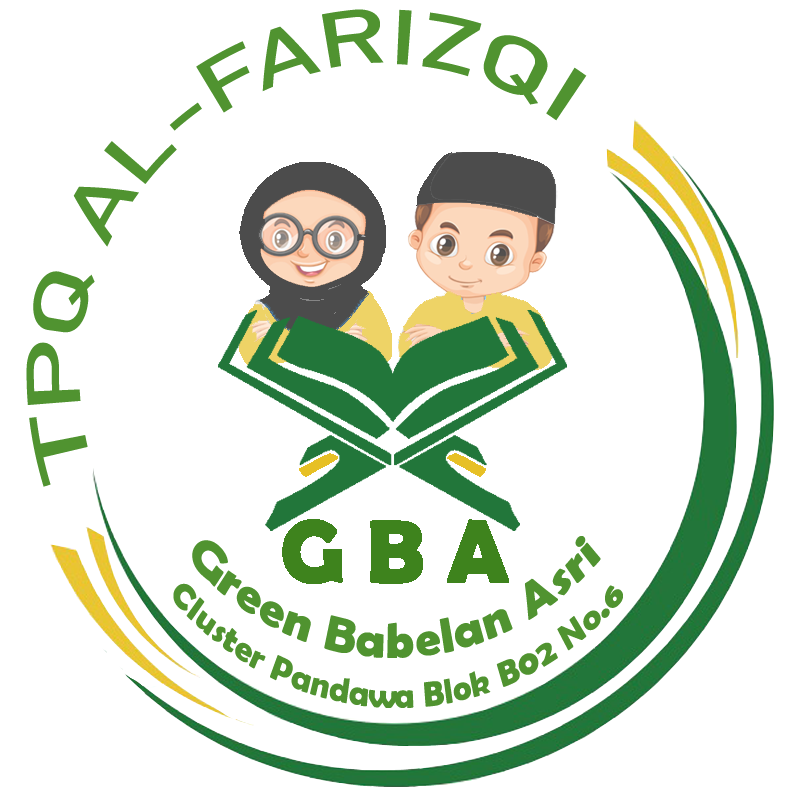
<style>
.page{position:relative;width:800px;height:800px;background:#ffffff}
.page>*{position:absolute;margin:0}
.t1{font:75px "Bahnschrift";color:#509330}
.t2{font:50px "BerlinSansFBDemi-Bold";color:#509330;scale:0.85 1}
.t3{font:34.9px "BerlinSansFBDemi-Bold";color:#509330;scale:0.85 1}
</style>
<div class="page">
<p class="t1" style="left:26px;top:9px;width:561px;height:478px;rotate:-36deg">TPQ AL-FARIZQI</p>
<p class="t2" style="left:192px;top:536px;width:409px;height:122px">Green Babelan Asri</p>
<p class="t3" style="left:173px;top:583px;width:450px;height:125px">Cluster Pandawa Blok B02 No.6</p>
</div>
